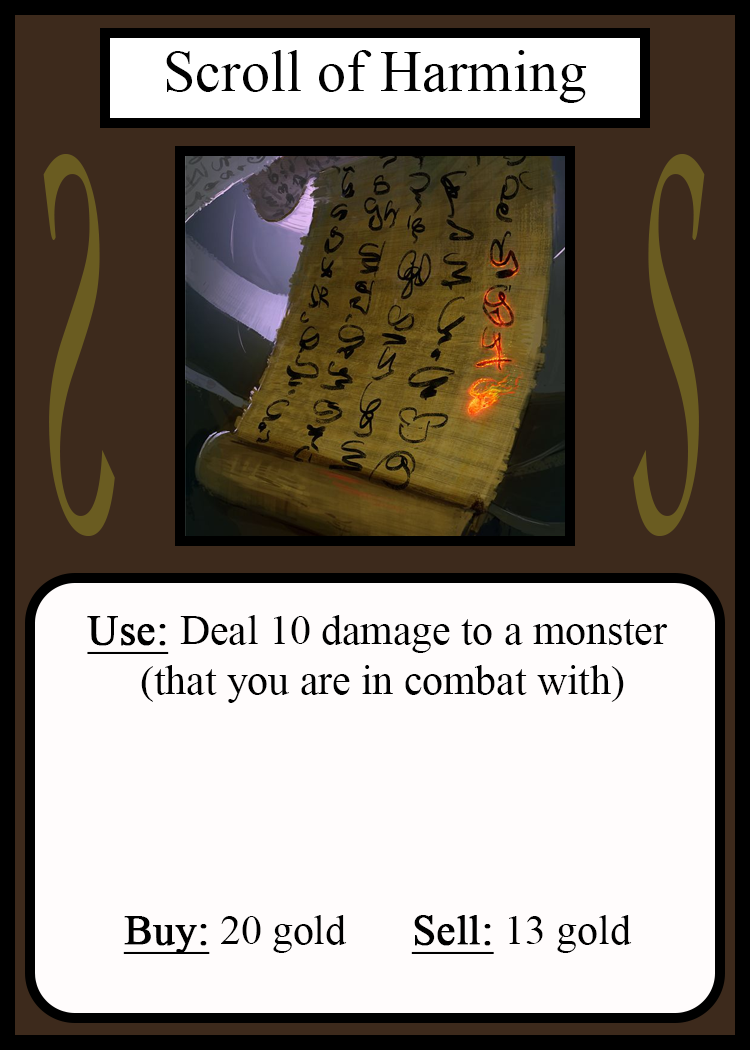
<style>
.page{position:relative;width:750px;height:1050px;background:#fffcfc}
.page>*{position:absolute;margin:0}
.t1{font:58.3px "TimesNewRomanPSMT";color:#010101}
.t2{font:548.5px "Apple-Chancery";color:#6a5c21;scale:0.27 1}
.t3{font:548.2px "Apple-Chancery";color:#6a5c21;scale:0.27 1}
.t4{font:41.7px "TimesNewRomanPSMT";color:#000000}
.t5{font:41.7px "TimesNewRomanPSMT";color:#000000;font-weight:bold;text-decoration:underline}
</style>
<div class="page">
<p class="t1" style="left:166px;top:50px;width:421px;height:53px">Scroll of Harming</p>
<p class="t2" style="left:43px;top:154px;width:72px;height:382px;rotate:180deg">S</p>
<p class="t3" style="left:633px;top:154px;width:72px;height:382px">S</p>
<p class="t4" style="left:87px;top:615px;width:581px;height:339px;text-align:center"><span class="t5">Use: </span>Deal 10 damage to a monster<br> (that you are in combat with)<br><br><br><br><br><span class="t5">Buy:</span> 20 gold   <span class="t5">Sell:</span> 13 gold</p>
</div>
